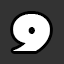
<style>
.page{position:relative;width:64px;height:64px;background:#333333}
.page>*{position:absolute;margin:0}
.t1{font:48px "GillSans-UltraBold";color:#ffffff}
</style>
<div class="page">
<p class="t1" style="left:13px;top:14px;width:37px;height:37px">9</p>
</div>
